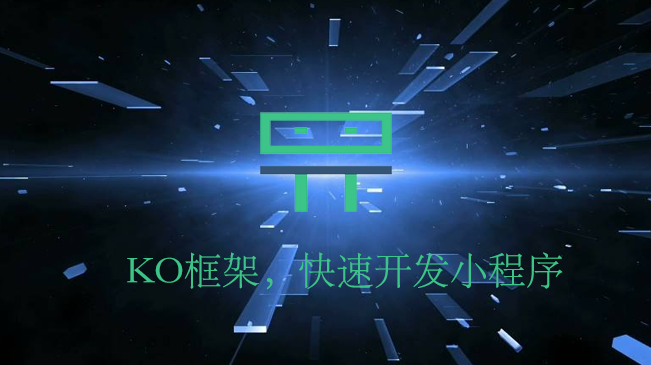
<style>
.page{position:relative;width:651px;height:365px}
.page>*{position:absolute;margin:0}
.t1{font:38px "STSong";color:#3dc489}
</style>
<div class="page">
<p class="t1" style="left:127px;top:252px;width:436px;height:38px">KO框架，快速开发小程序</p>
</div>
